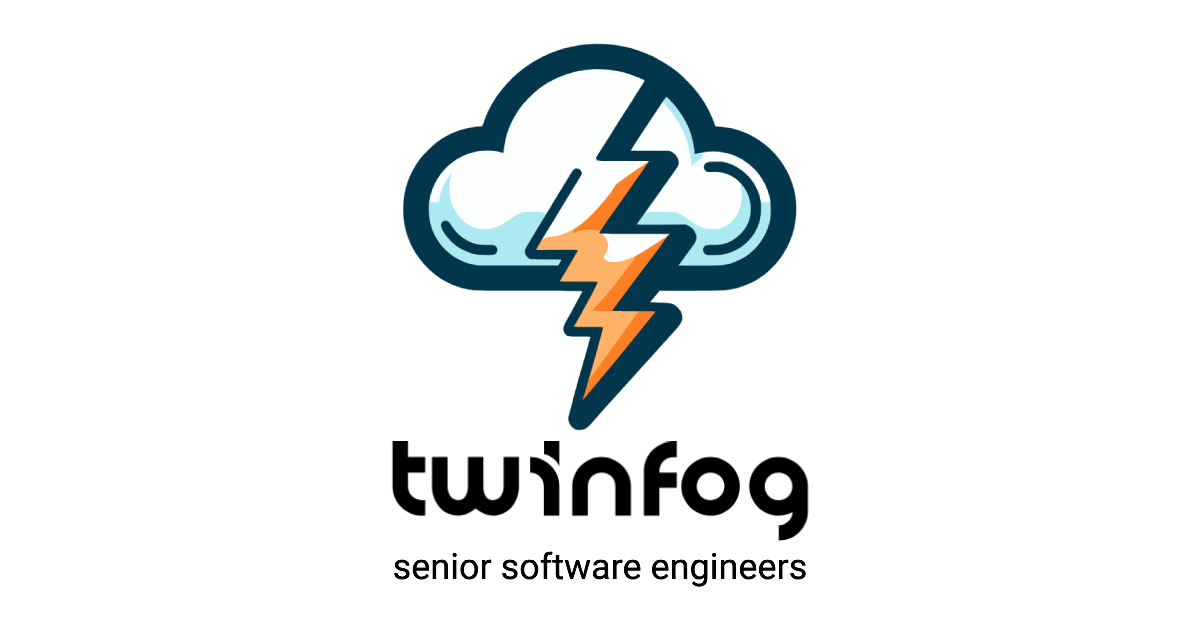
<style>
.page{position:relative;width:1200px;height:630px;background:#ffffff}
.page>*{position:absolute;margin:0}
.t1{font:36px "Roboto-Regular";color:#000000}
</style>
<div class="page">
<p class="t1" style="left:394px;top:551px;width:412px;height:36px">senior software engineers</p>
</div>
